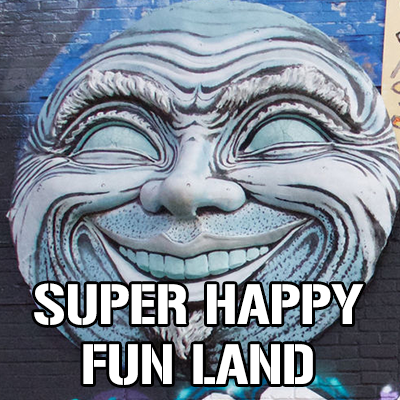
<style>
.page{position:relative;width:400px;height:400px}
.page>*{position:absolute;margin:0}
.t1{font:50px "Gunplay-Regular";color:#ffffff}
</style>
<div class="page">
<p class="t1" style="left:34px;top:283px;width:330px;height:102px;text-align:center">SUPER HAPPY<br>FUN LAND</p>
</div>
